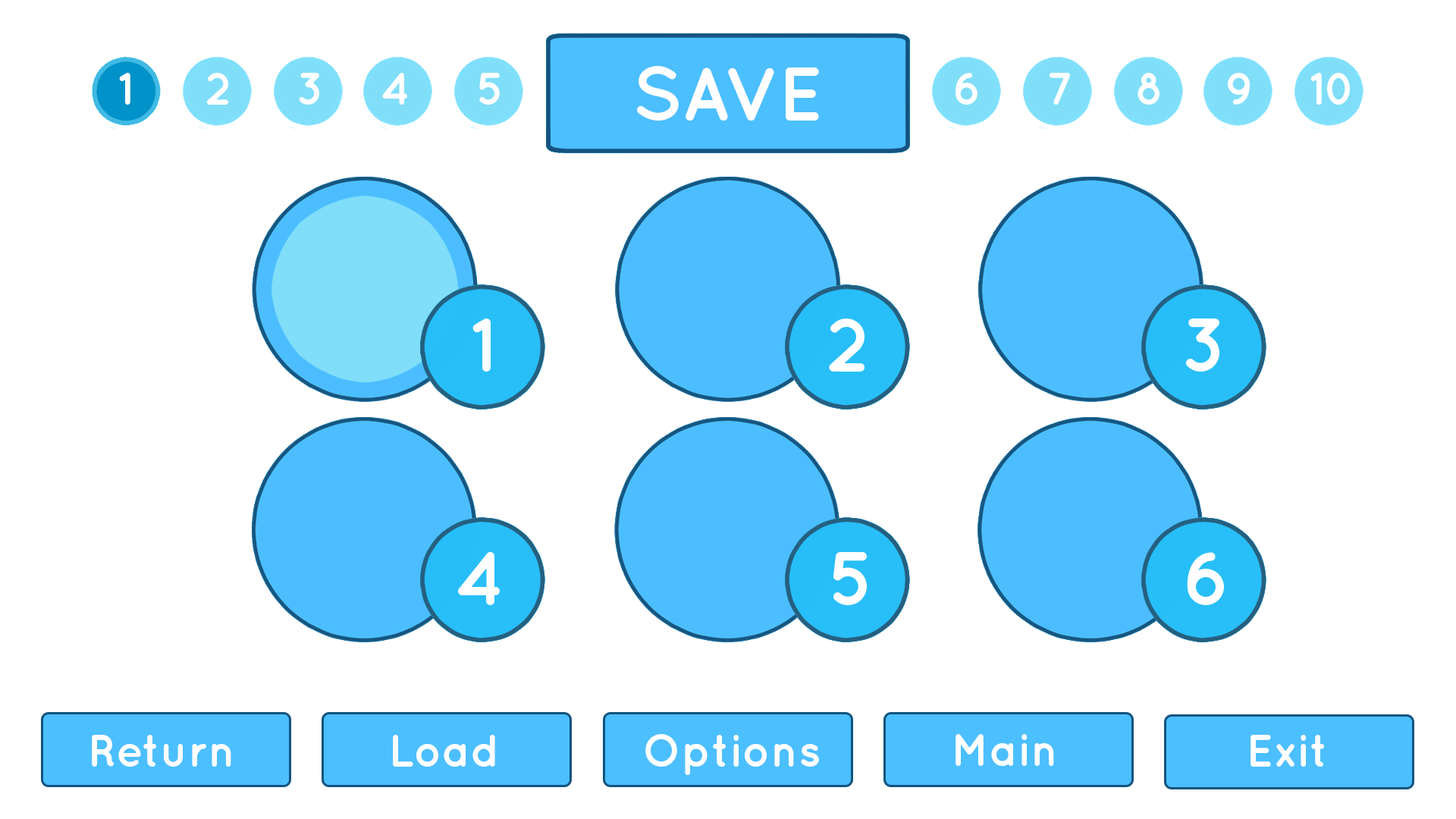
<style>
.page{position:relative;width:1456px;height:819px;background:#ffffff}
.page>*{position:absolute;margin:0}
.t1{font:75.8px "Quicksand-Bold";color:#ffffff}
.t2{font:45.5px "Quicksand-Bold";color:#ffffff}
</style>
<div class="page">
<p class="t1" style="left:637px;top:66px;width:182px;height:55px">SAVE</p>
<p class="t2" style="left:92px;top:735px;width:139px;height:32px">Return</p>
<p class="t2" style="left:393px;top:735px;width:102px;height:32px">Load</p>
<p class="t2" style="left:645px;top:734px;width:174px;height:41px">Options</p>
<p class="t2" style="left:955px;top:734px;width:99px;height:32px">Main</p>
<p class="t2" style="left:1250px;top:735px;width:74px;height:32px">Exit</p>
</div>
